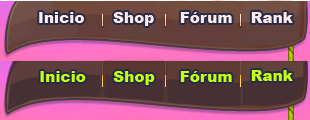
<style>
.page{position:relative;width:310px;height:120px}
.page>*{position:absolute;margin:0}
.t1{font:15.2px "Arial-Black";color:#ffeaeb}
.t2{font:15.2px "Arial-Black";color:#c2ff11}
</style>
<div class="page">
<p class="t1" style="left:113px;top:12px;width:41px;height:14px">Shop</p>
<p class="t1" style="left:180px;top:12px;width:52px;height:11px">Fórum</p>
<p class="t1" style="left:251px;top:12px;width:42px;height:11px">Rank</p>
<p class="t2" style="left:40px;top:71px;width:46px;height:11px">Inicio</p>
<p class="t2" style="left:113px;top:71px;width:42px;height:14px">Shop</p>
<p class="t2" style="left:180px;top:71px;width:52px;height:11px">Fórum</p>
<p class="t2" style="left:251px;top:70px;width:42px;height:11px">Rank</p>
</div>
